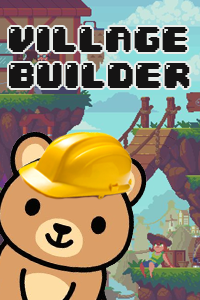
<style>
.page{position:relative;width:200px;height:300px}
.page>*{position:absolute;margin:0}
.t1{font:30px "04b30";color:#151414}
</style>
<div class="page">
<p class="t1" style="left:9px;top:27px;width:181px;height:61px">VILLAGE<br>BUILDER</p>
</div>
